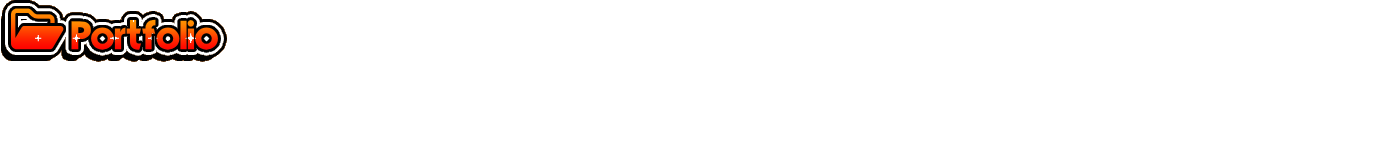
<style>
.page{position:relative;width:1386px;height:155px;background:#ffffff}
.page>*{position:absolute;margin:0}
.t1{font:40px "Mouser"}
</style>
<div class="page">
<p class="t1" style="left:71px;top:19px;width:147px;height:31px">Portfolio</p>
<p class="t1" style="left:71px;top:19px;width:147px;height:31px">Portfolio</p>
</div>
